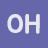
<style>
.page{position:relative;width:48px;height:48px;background:#6667ab}
.page>*{position:absolute;margin:0}
.t1{font:27.2px "BMJUAOTF";color:#e6e6f0}
</style>
<div class="page">
<p class="t1" style="left:7px;top:14px;width:33px;height:20px">OH</p>
</div>
